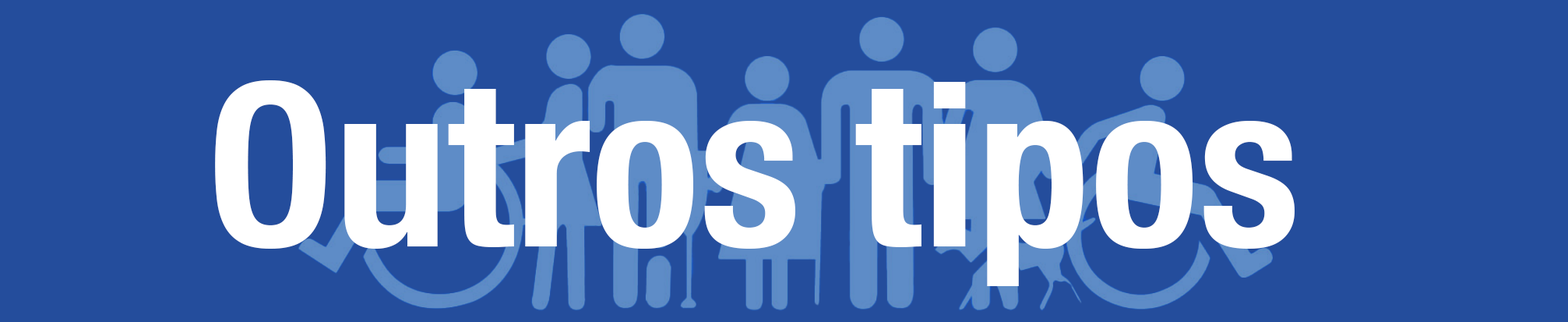
<style>
.page{position:relative;width:1568px;height:322px;background:#244d9c}
.page>*{position:absolute;margin:0}
.t1{font:227.2px "HelveticaNeue-CondensedBold";color:#ffffff}
</style>
<div class="page">
<p class="t1" style="left:215px;top:80px;width:1080px;height:206px">Outros tipos</p>
</div>
